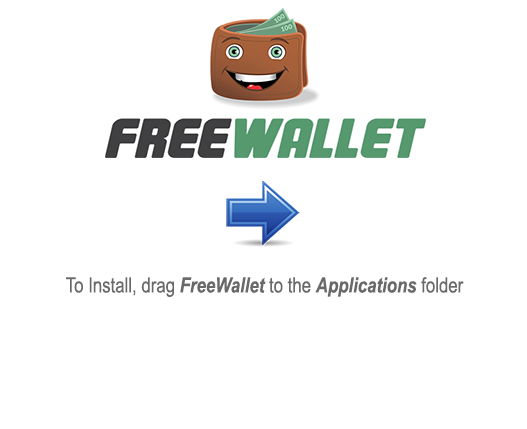
<style>
.page{position:relative;width:527px;height:429px;background:#ffffff}
.page>*{position:absolute;margin:0}
.t1{font:21px "ArialMT";color:#696969;scale:0.8 1}
.t2{font:21px "Arial-BoldItalicMT";color:#696969;scale:0.8 1}
</style>
<div class="page">
<p class="t1" style="left:66px;top:277px;width:398px;height:20px">To Install, drag <span class="t2">FreeWallet</span> to the <span class="t2">Applications</span> folder</p>
</div>
